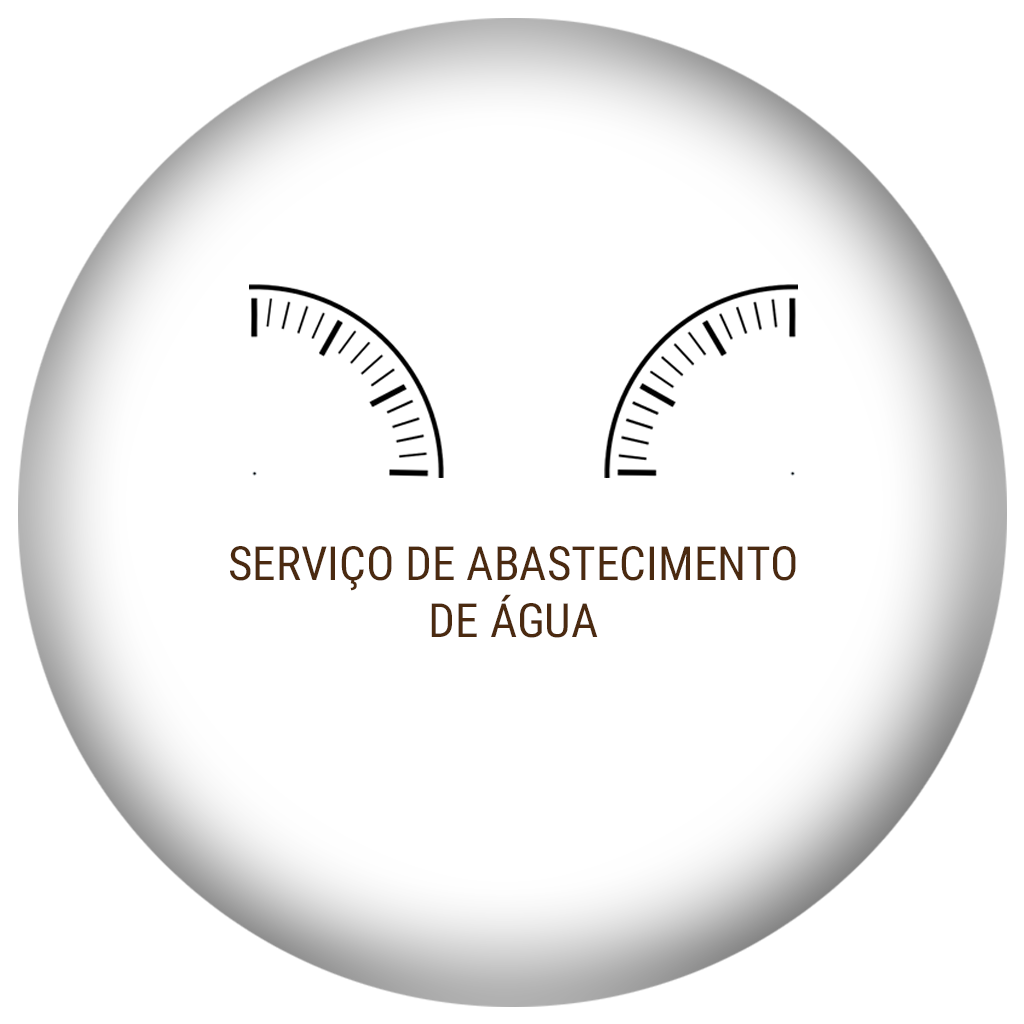
<style>
.page{position:relative;width:1024px;height:1024px;background:#ffffff}
.page>*{position:absolute;margin:0}
.t1{font:47.3px "RobotoCondensed-Regular";color:#4b2a10}
</style>
<div class="page">
<p class="t1" style="left:230px;top:546px;width:566px;height:92px;text-align:center">SERVIÇO DE ABASTECIMENTO<br>DE ÁGUA</p>
</div>
